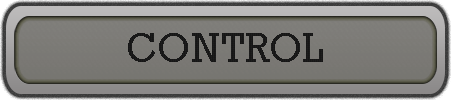
<style>
.page{position:relative;width:451px;height:100px}
.page>*{position:absolute;margin:0}
.t1{font:41.7px "Rockwell";color:#1a1a1a}
</style>
<div class="page">
<p class="t1" style="left:128px;top:33px;width:195px;height:29px">CONTROL</p>
</div>
